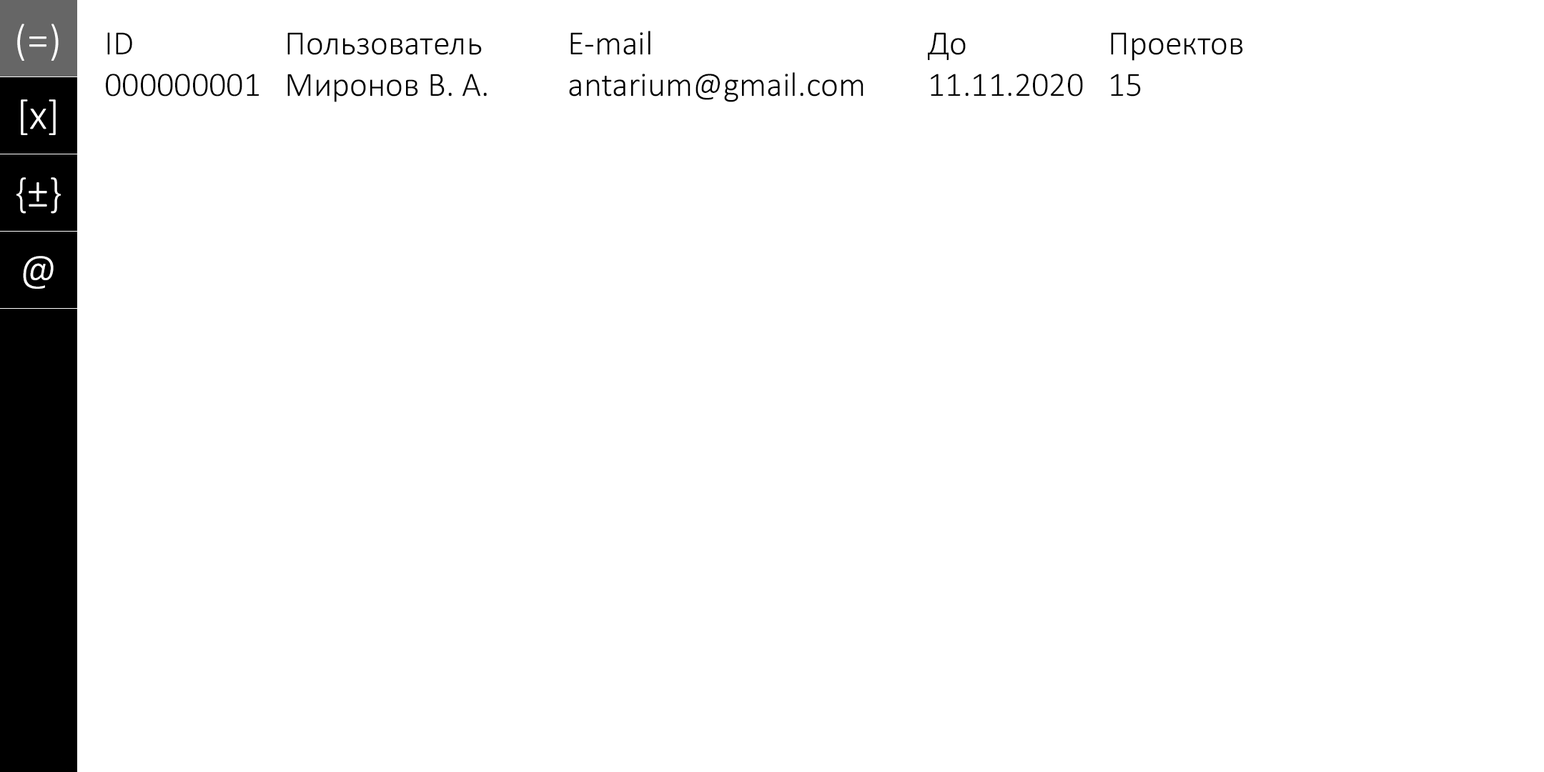
<style>
.page{position:relative;width:1544px;height:772px;background:#ffffff}
.page>*{position:absolute;margin:0}
.t1{font:42.9px "Calibri-Light";color:#ffffff}
.t2{font:34.3px "Calibri-Light";color:#000000}
</style>
<div class="page">
<p class="t1" style="left:17px;top:24px;width:42px;height:37px">(=)</p>
<p class="t2" style="left:106px;top:31px;width:1137px;height:71px">ID      Пользователь    E-mail           До      Проектов<br>000000001 Миронов В. А.    antarium@gmail.com   11.11.2020 15</p>
<p class="t1" style="left:21px;top:99px;width:35px;height:36px">[x]</p>
<p class="t1" style="left:16px;top:177px;width:45px;height:37px">{±}</p>
<p class="t1" style="left:23px;top:256px;width:31px;height:33px">@</p>
</div>
